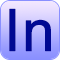
<style>
.page{position:relative;width:60px;height:60px}
.page>*{position:absolute;margin:0}
.t1{font:58.3px "ArialMT";color:#000993;font-weight:bold}
</style>
<div class="page">
<p class="t1" style="left:9px;top:8px;width:42px;height:44px">In</p>
</div>
